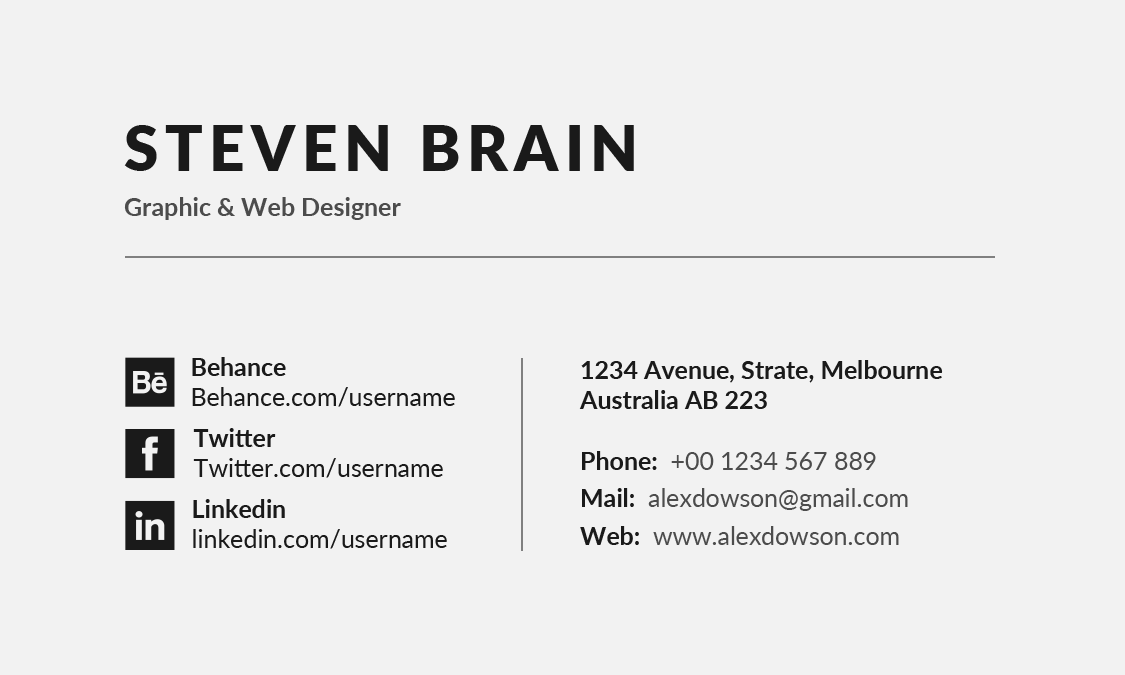
<style>
.page{position:relative;width:1125px;height:675px;background:#f2f2f2}
.page>*{position:absolute;margin:0}
.t1{font:62.5px "Lato-Black";letter-spacing:0.1em;color:#1a1a1a;text-transform:uppercase}
.t2{font:25px "Lato-Bold";color:#4c4c4c}
.t3{font:25px "Lato-Regular";color:#1a1a1a}
.t4{font:25px "Lato-Bold";color:#1a1a1a}
.t5{font:25px/37.5px "Lato-Regular";color:#4c4c4c}
.t6{font:25px/37.5px "Lato-Bold";color:#1a1a1a}
</style>
<div class="page">
<p class="t1" style="left:124px;top:125px;width:510px;height:46px">STEVEN BRAIN</p>
<p class="t2" style="left:124px;top:197px;width:277px;height:23px">Graphic &amp; Web Designer</p>
<p class="t3" style="left:192px;top:357px;width:263px;height:50px"><span class="t4">Behance<br></span>Behance.com/username</p>
<p class="t4" style="left:579px;top:360px;width:364px;height:49px">1234 Avenue, Strate, Melbourne<br>Australia AB 223</p>
<p class="t3" style="left:193px;top:428px;width:250px;height:50px"><span class="t4">Twitter<br></span>Twitter.com/username</p>
<p class="t5" style="left:580px;top:451px;width:328px;height:94px"><span class="t6">Phone:</span>  +00 1234 567 889<br><span class="t6">Mail:</span>  alexdowson@gmail.com<br><span class="t6">Web:</span>  www.alexdowson.com</p>
<p class="t3" style="left:193px;top:499px;width:254px;height:50px"><span class="t4">Linkedin<br></span>linkedin.com/username</p>
</div>
